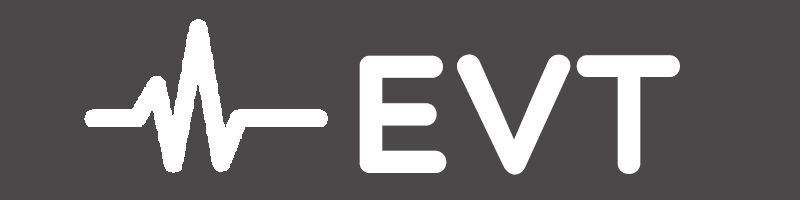
<style>
.page{position:relative;width:800px;height:200px;background:#4a4848}
.page>*{position:absolute;margin:0}
.t1{font:169.5px "Multicolore";color:#ffffff}
</style>
<div class="page">
<p class="t1" style="left:359px;top:54px;width:321px;height:121px">EVT</p>
</div>
